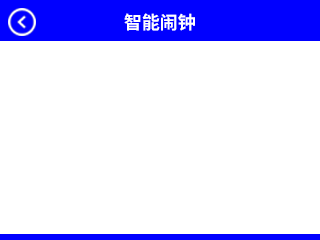
<style>
.page{position:relative;width:320px;height:240px;background:#ffffff}
.page>*{position:absolute;margin:0}
.t1{font:18px "SourceHanSansSC-Bold";color:#ffffff}
</style>
<div class="page">
<p class="t1" style="left:124px;top:13px;width:71px;height:18px">智能闹钟</p>
</div>
